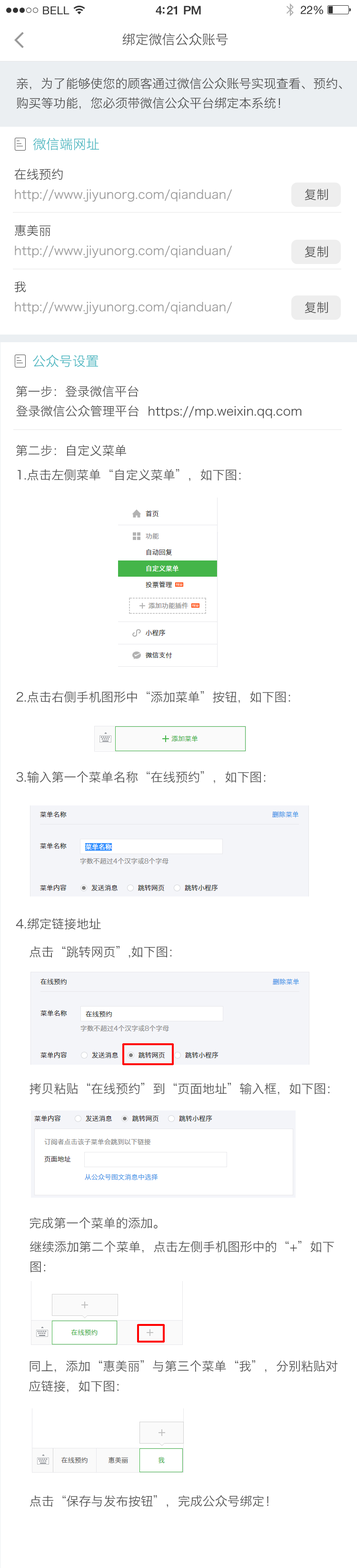
<style>
.page{position:relative;width:357px;height:1568px;background:#ffffff}
.page>*{position:absolute;margin:0}
.t1{font:13.3px "HiraginoSansGB-W3";color:#4d4d4d}
.t2{font:12.4px/19.5px "HiraginoSansGB-W3";color:#4d4d4d}
.t3{font:13.3px "HiraginoSansGB-W3";color:#4bb7c1}
.t4{font:12.4px/20px "HiraginoSansGB-W3";color:#999999}
.t5{font:12.4px/20px "HiraginoSansGB-W3";color:#4c4c4c}
.t6{font:12.4px "HiraginoSansGB-W3";color:#4d4d4d}
.t7{font:12.4px/20px "HiraginoSansGB-W3";color:#4d4d4d}
</style>
<div class="page">
<p class="t1" style="left:122px;top:33px;width:106px;height:13px">绑定微信公众账号</p>
<p class="t2" style="left:17px;top:77px;width:326px;height:32px;text-align:justify">亲，为了能够使您的顾客通过微信公众账号实现查看、预约、<br>购买等功能，您必须带微信公众平台绑定本系统！</p>
<p class="t3" style="left:33px;top:138px;width:66px;height:13px">微信端网址</p>
<p class="t4" style="left:14px;top:168px;width:219px;height:34px;text-align:justify"><span class="t5">在线预约<br></span>http://www.jiyunorg.com/qianduan/</p>
<p class="t6" style="left:305px;top:189px;width:23px;height:11px">复制</p>
<p class="t4" style="left:15px;top:224px;width:218px;height:34px;text-align:justify"><span class="t5">惠美丽<br></span>http://www.jiyunorg.com/qianduan/</p>
<p class="t6" style="left:305px;top:246px;width:23px;height:11px">复制</p>
<p class="t4" style="left:14px;top:281px;width:219px;height:33px;text-align:justify"><span class="t5">我<br></span>http://www.jiyunorg.com/qianduan/</p>
<p class="t6" style="left:305px;top:302px;width:23px;height:11px">复制</p>
<p class="t3" style="left:33px;top:355px;width:65px;height:12px">公众号设置</p>
<p class="t6" style="left:16px;top:386px;width:123px;height:11px">第一步：登录微信平台</p>
<p class="t6" style="left:16px;top:405px;width:286px;height:13px">登录微信公众管理平台  https://mp.weixin.qq.com</p>
<p class="t6" style="left:16px;top:445px;width:110px;height:12px">第二步：自定义菜单</p>
<p class="t6" style="left:18px;top:469px;width:223px;height:12px">1.点击左侧菜单“自定义菜单”，如下图：</p>
<p class="t6" style="left:16px;top:691px;width:275px;height:12px">2.点击右侧手机图形中“添加菜单”按钮，如下图：</p>
<p class="t6" style="left:16px;top:771px;width:250px;height:13px">3.输入第一个菜单名称“在线预约”，如下图：</p>
<p class="t6" style="left:16px;top:918px;width:85px;height:12px">4.绑定链接地址</p>
<p class="t6" style="left:30px;top:946px;width:142px;height:12px">点击“跳转网页”,如下图：</p>
<p class="t6" style="left:30px;top:1083px;width:300px;height:12px">拷贝粘贴“在线预约”到“页面地址”输入框，如下图：</p>
<p class="t6" style="left:30px;top:1217px;width:128px;height:12px">完成第一个菜单的添加。</p>
<p class="t7" style="left:30px;top:1241px;width:305px;height:32px;text-align:justify">继续添加第二个菜单，点击左侧手机图形中的“+”如下<br>图：</p>
<p class="t7" style="left:29px;top:1360px;width:309px;height:33px;text-align:justify">同上，添加“惠美丽”与第三个菜单“我”，分别粘贴对<br>应链接，如下图：</p>
<p class="t6" style="left:30px;top:1495px;width:239px;height:12px">点击“保存与发布按钮”，完成公众号绑定！</p>
</div>
